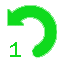
<style>
.page{position:relative;width:64px;height:64px;background:#ffffff}
.page>*{position:absolute;margin:0}
.t1{font:22.2px "FranklinGothic-Medium";color:#0fda1d}
</style>
<div class="page">
<p class="t1" style="left:10px;top:42px;width:11px;height:15px">1</p>
</div>
